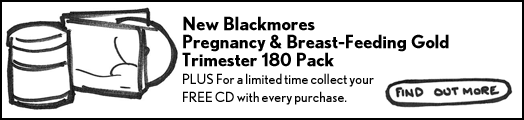
<style>
.page{position:relative;width:524px;height:120px;background:#ffffff}
.page>*{position:absolute;margin:0}
.t1{font:18px/18px "NobelBold";color:#000000}
.t2{font:14px/18px "NobelRegular";color:#000000}
</style>
<div class="page">
<p class="t1" style="left:182px;top:16px;width:267px;height:89px">New Blackmores <br>Pregnancy &amp; Breast-Feeding Gold <br>Trimester 180 Pack<br><span class="t2">PLUS For a limited time collect your <br>FREE CD with every purchase.</span></p>
</div>
